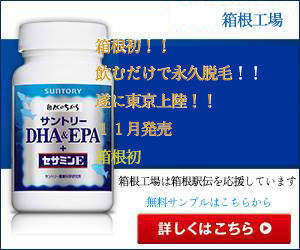
<style>
.page{position:relative;width:300px;height:250px;background:#003399}
.page>*{position:absolute;margin:0}
.t1{font:16px "YuMin_36pKn-Medium";letter-spacing:-0.075em;color:#006699;font-weight:bold}
.t2{font:16px "YuMin_36pKn-Medium";letter-spacing:-0.075em;font-weight:bold}
.t3{font:16px "YuMin_36pKn-Medium";letter-spacing:-0.075em;color:#cc9900;font-weight:bold}
.t4{font:11px "YuMin_36pKn-Medium";letter-spacing:-0.075em;color:#000000;font-weight:bold}
.t5{font:11px "YuMin_36pKn-Medium";letter-spacing:-0.075em;color:#0099cc;font-weight:bold}
</style>
<div class="page">
<p class="t1" style="left:222px;top:12px;width:61px;height:16px">箱根工場</p>
<p class="t2" style="left:95px;top:37px;width:162px;height:128px">箱根初！！<br>飲むだけで永久脱毛！！<br>遂に東京上陸！！<br>１１月発売<br>箱根初</p>
<p class="t3" style="left:95px;top:38px;width:70px;height:16px">箱根初！！</p>
<p class="t3" style="left:95px;top:65px;width:137px;height:16px">飲むだけで永久脱毛</p>
<p class="t3" style="left:95px;top:93px;width:116px;height:16px">遂に東京上陸！！</p>
<p class="t3" style="left:100px;top:121px;width:72px;height:15px">１１月発売</p>
<p class="t4" style="left:118px;top:175px;width:178px;height:12px">箱根工場は箱根駅伝を応援しています</p>
<p class="t5" style="left:146px;top:196px;width:125px;height:12px">無料サンプルはこちらから</p>
</div>
